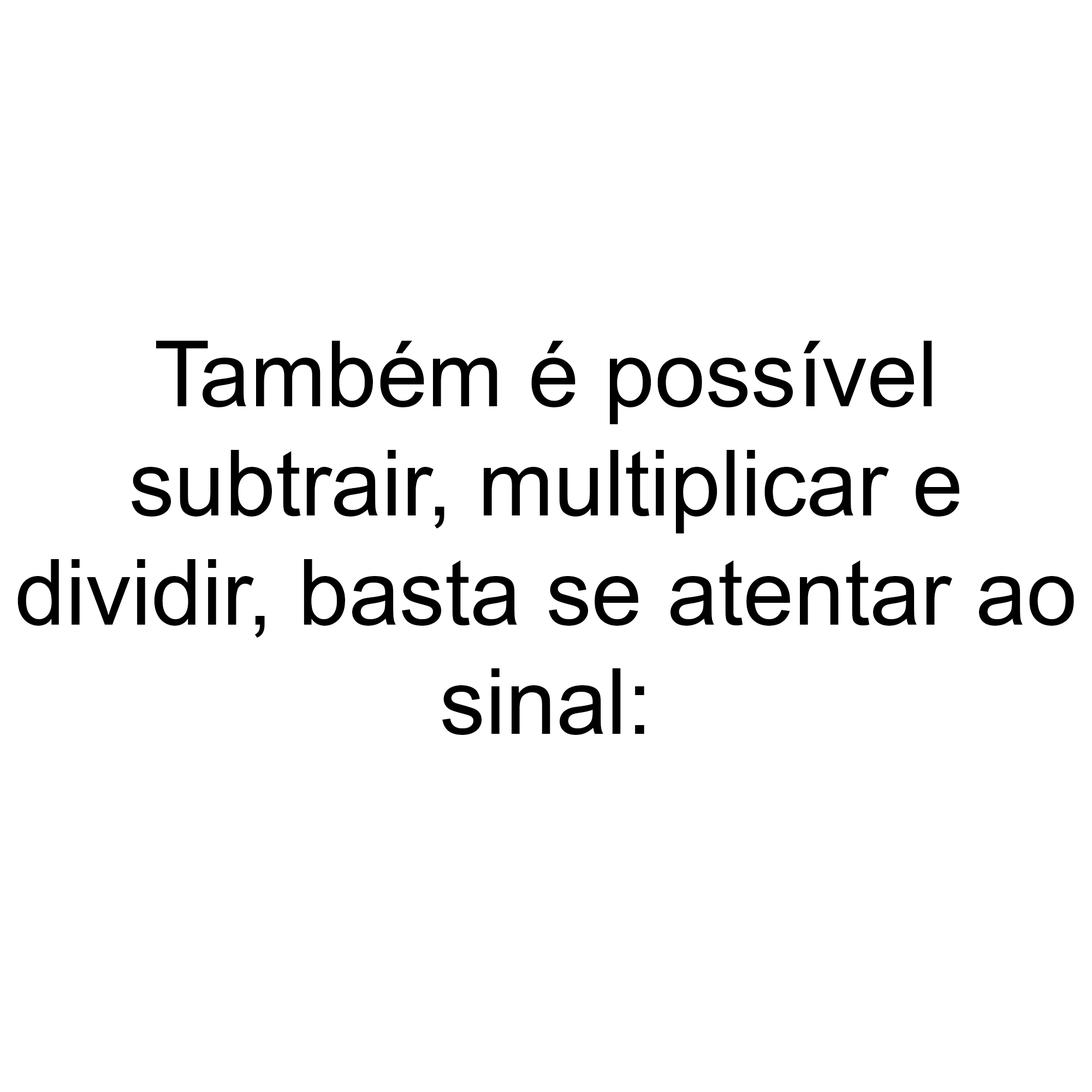
<style>
.page{position:relative;width:1092px;height:1092px;background:#ffffff}
.page>*{position:absolute;margin:0}
.t1{font:91px "ArialMT";color:#000000}
</style>
<div class="page">
<p class="t1" style="left:17px;top:341px;width:1057px;height:394px;text-align:center">Também é possível<br>subtrair, multiplicar e<br>dividir, basta se atentar ao<br>sinal:</p>
</div>
